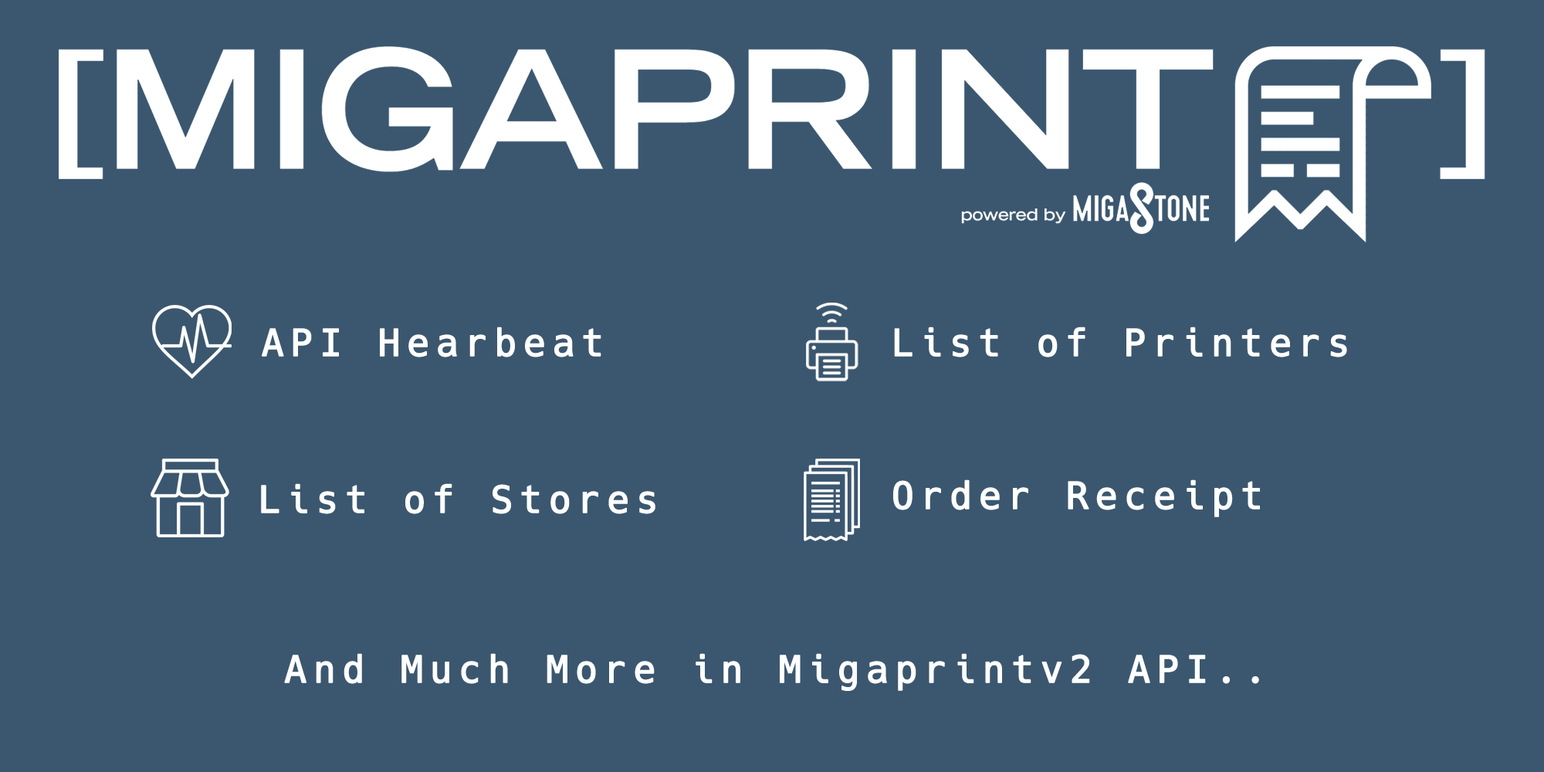
<style>
.page{position:relative;width:1544px;height:772px;background:#3b576f}
.page>*{position:absolute;margin:0}
.t1{font:37.1px "Hack-Regular";letter-spacing:0.16em;color:#ffffff;font-weight:bold}
</style>
<div class="page">
<p class="t1" style="left:262px;top:327px;width:340px;height:31px">API Hearbeat</p>
<p class="t1" style="left:894px;top:327px;width:453px;height:31px">List of Printers</p>
<p class="t1" style="left:261px;top:483px;width:395px;height:31px">List of Stores</p>
<p class="t1" style="left:893px;top:480px;width:367px;height:37px">Order Receipt</p>
<p class="t1" style="left:284px;top:653px;width:975px;height:38px">And Much More in Migaprintv2 API..</p>
</div>
